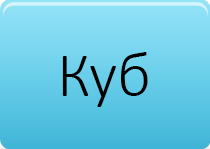
<style>
.page{position:relative;width:210px;height:149px}
.page>*{position:absolute;margin:0}
.t1{font:64px "Calibri-Light";color:#000000}
</style>
<div class="page">
<p class="t1" style="left:62px;top:52px;width:86px;height:55px">Куб</p>
</div>
